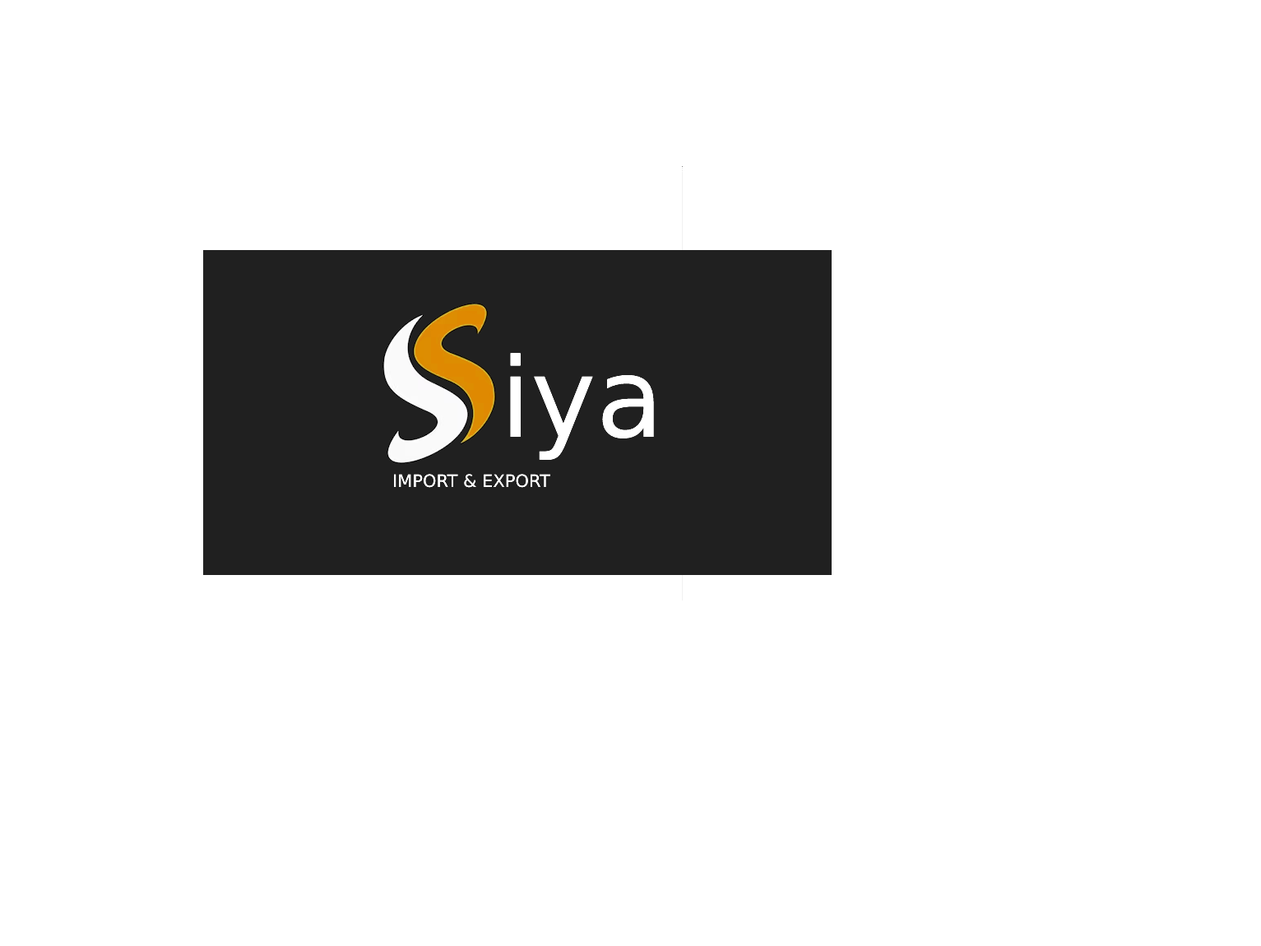
<style>
.page{position:relative;width:1261px;height:946px;background:#ffffff}
.page>*{position:absolute;margin:0}
.t1{font:110.2px "DejaVuSans";color:#ffffff}
.t2{font:110.2px "DejaVuSans";color:#202020}
.t3{font:17.3px "DejaVuSans";color:#ffffff}
</style>
<div class="page">
<p class="t1" style="left:510px;top:353px;width:144px;height:107px"><span class="t2">i</span>ya</p>
<p class="t3" style="left:394px;top:474px;width:156px;height:14px">IMPORT &amp; EXPORT</p>
</div>
